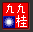
<style>
.page{position:relative;width:33px;height:32px;background:#f20000}
.page>*{position:absolute;margin:0}
.t1{font:10.4px "SimSun";color:#ffffff}
.t2{font:11.7px "SimSun";color:#ffffff}
</style>
<div class="page">
<p class="t1" style="left:6px;top:4px;width:19px;height:9px">九九</p>
<p class="t2" style="left:16px;top:15px;width:11px;height:12px">桂</p>
</div>
